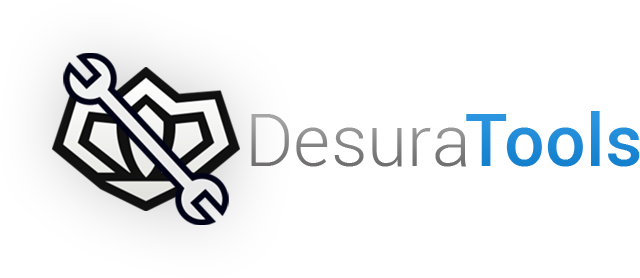
<style>
.page{position:relative;width:640px;height:278px;background:#ffffff}
.page>*{position:absolute;margin:0}
.t1{font:72px "Roboto-Medium";color:#1e89d5}
.t2{font:72px "Roboto-Light";color:#838282}
</style>
<div class="page">
<p class="t1" style="left:466px;top:111px;width:174px;height:56px">Tools</p>
<p class="t2" style="left:251px;top:114px;width:215px;height:53px">Desura</p>
</div>
